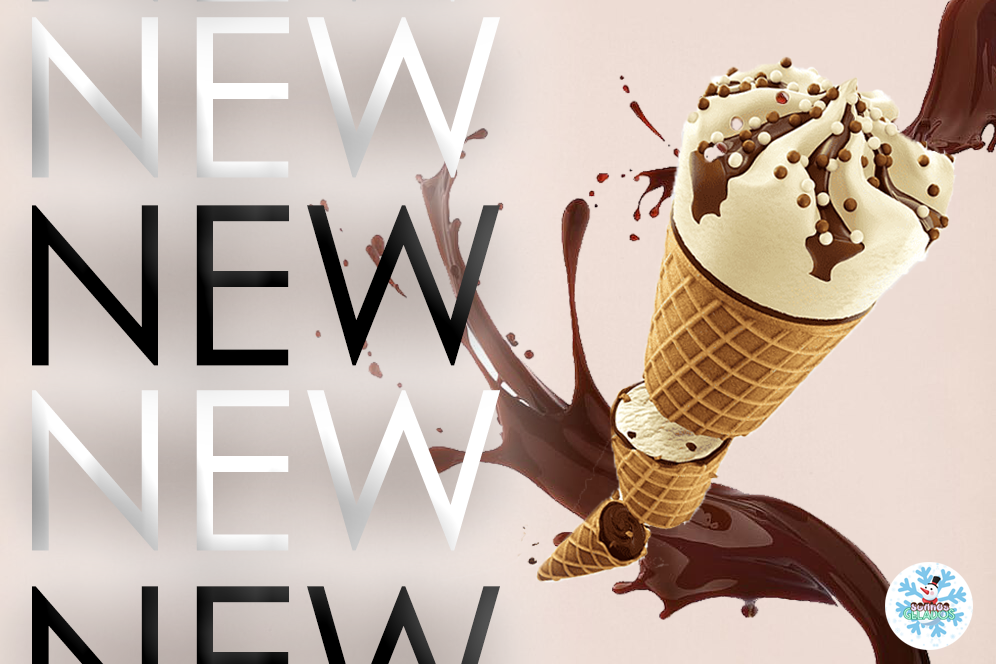
<style>
.page{position:relative;width:996px;height:664px}
.page>*{position:absolute;margin:0}
.t1{font:222.8px "CenturyGothic";color:#ffffff}
.t2{font:222.8px "CenturyGothic";color:#010101}
</style>
<div class="page">
<p class="t1" style="left:32px;top:17px;width:468px;height:161px">NEW</p>
<p class="t2" style="left:32px;top:205px;width:468px;height:161px">NEW</p>
<p class="t1" style="left:32px;top:390px;width:468px;height:161px">NEW</p>
</div>
